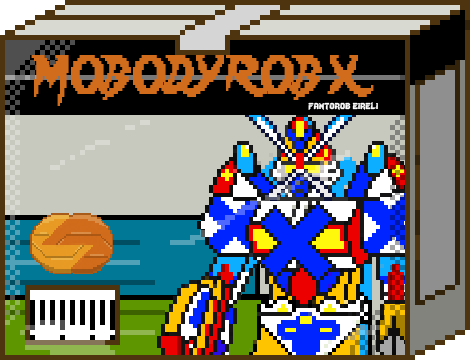
<style>
.page{position:relative;width:470px;height:360px}
.page>*{position:absolute;margin:0}
.t1{font:48px "Lady-Radical";color:#d06c1b;scale:0.72 1}
.t2{font:12px "Lady-Radical";color:#fbfbfb}
</style>
<div class="page">
<p class="t1" style="left:31px;top:55px;width:343px;height:51px">MOBODYROB X</p>
<p class="t2" style="left:308px;top:102px;width:70px;height:8px">fantorob eireli</p>
</div>
